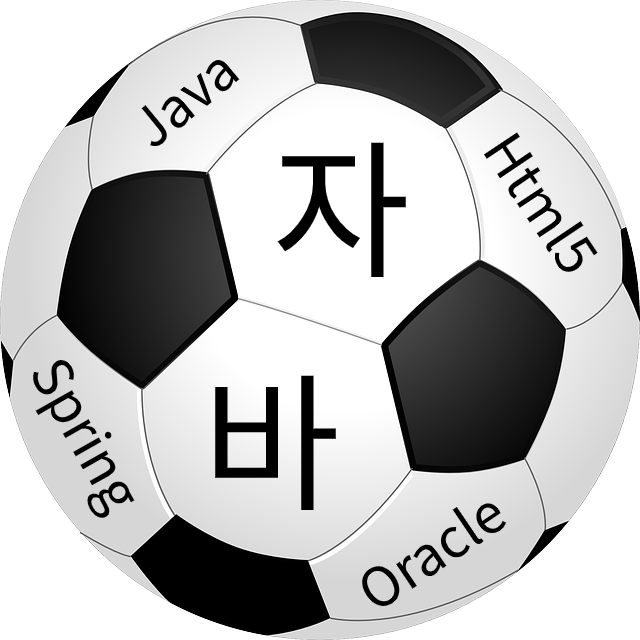
<style>
.page{position:relative;width:640px;height:640px;background:#ffffff}
.page>*{position:absolute;margin:0}
.t1{font:54px "NotoSansKR-Regular";color:#000000}
.t2{font:150px "NotoSansKR-Regular";color:#000000}
</style>
<div class="page">
<p class="t1" style="left:141px;top:60px;width:99px;height:86px;rotate:-39deg">Java</p>
<p class="t1" style="left:484px;top:132px;width:114px;height:140px;rotate:56deg">Html5</p>
<p class="t2" style="left:277px;top:142px;width:129px;height:136px">자</p>
<p class="t1" style="left:33px;top:360px;width:102px;height:158px;rotate:61deg">Spring</p>
<p class="t2" style="left:215px;top:375px;width:121px;height:135px">바</p>
<p class="t1" style="left:362px;top:503px;width:145px;height:103px;rotate:-34deg">Oracle</p>
</div>
